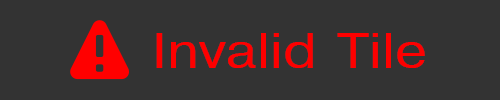
<style>
.page{position:relative;width:500px;height:100px;background:#333333}
.page>*{position:absolute;margin:0}
.t1{font:48px "Helvetica";color:#fe0000;scale:1.2 1}
</style>
<div class="page">
<p class="t1" style="left:156px;top:33px;width:269px;height:35px">Invalid Tile</p>
</div>
